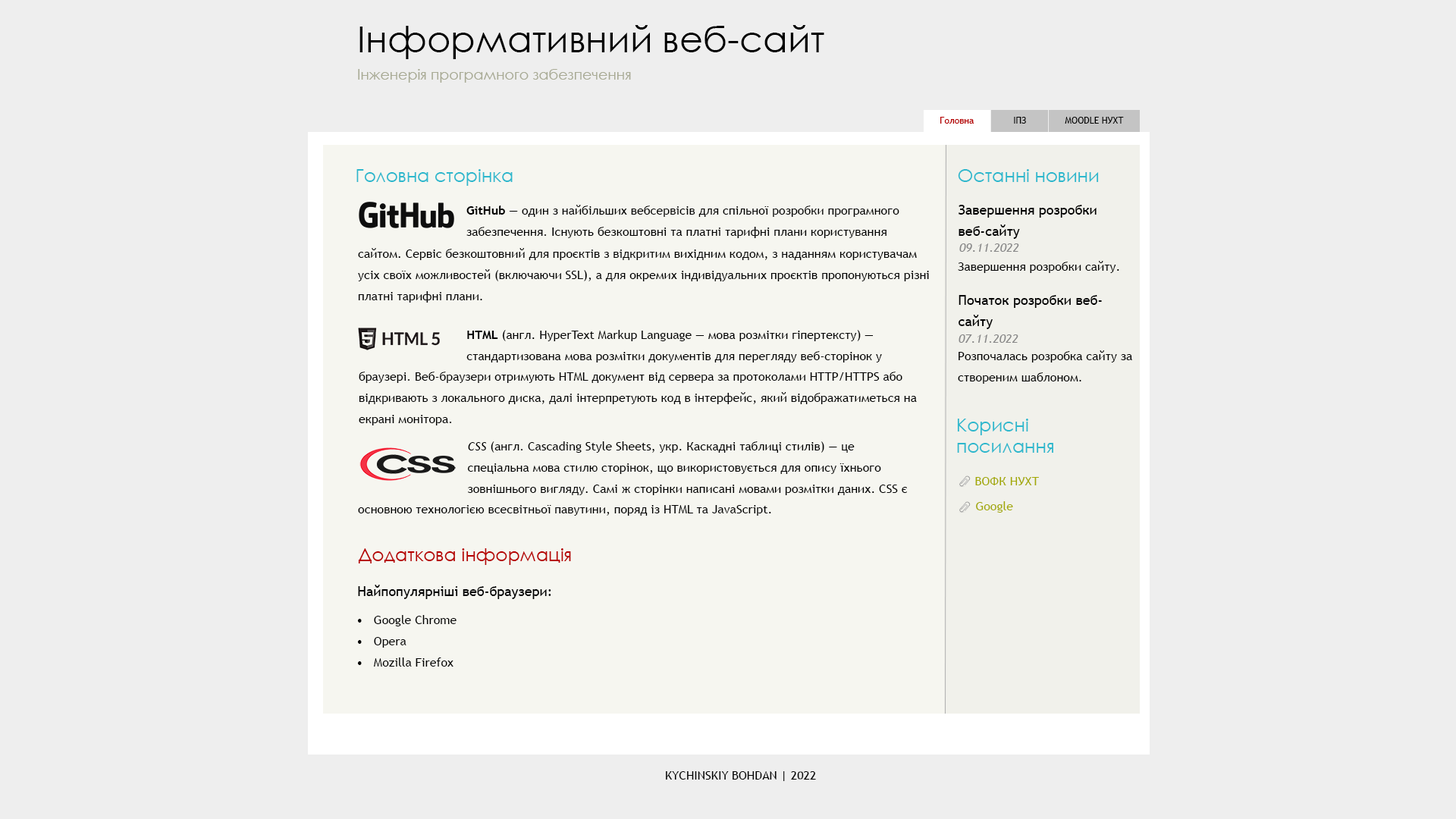
<style>
.page{position:relative;width:1456px;height:819px;background:#eeeeee}
.page>*{position:absolute;margin:0}
.t1{font:36.4px "CenturyGothic";color:#000000}
.t2{font:14.4px "CenturyGothic";color:#a8aa94}
.t3{font:9.1px "TrebuchetMS";color:#b60000}
.t4{font:9.1px "TrebuchetMS";color:#000000}
.t5{font:18.2px "CenturyGothic";color:#2db8cd}
.t6{font:12.1px/21.2px "TrebuchetMS";color:#000000}
.t7{font:12.1px/21.2px "TrebuchetMS-Bold";color:#000000}
.t8{font:13.6px/21.2px "TrebuchetMS";color:#000000}
.t9{font:12.1px "TrebuchetMS-Italic";color:#888888}
.t10{font:12.1px "TrebuchetMS";color:#000000}
.t11{font:18.2px/21.2px "CenturyGothic";color:#2db8cd}
.t12{font:12.1px/21.2px "TrebuchetMS-Italic";color:#000000}
.t13{font:12.1px "TrebuchetMS";color:#a4aa04}
.t14{font:18.2px "CenturyGothic";color:#b60000}
.t15{font:13.6px "TrebuchetMS";color:#000000}
</style>
<div class="page">
<p class="t1" style="left:359px;top:25px;width:465px;height:34px">Інформативний веб-сайт</p>
<p class="t2" style="left:358px;top:69px;width:273px;height:14px">Інженерія програмного забезпечення</p>
<p class="t3" style="left:940px;top:117px;width:34px;height:7px">Головна</p>
<p class="t4" style="left:1014px;top:117px;width:12px;height:7px">ІПЗ</p>
<p class="t4" style="left:1065px;top:117px;width:59px;height:7px">MOODLE НУХТ</p>
<p class="t5" style="left:356px;top:169px;width:157px;height:17px">Головна сторінка</p>
<p class="t5" style="left:958px;top:169px;width:141px;height:13px">Останні новини</p>
<p class="t6" style="left:466px;top:205px;width:433px;height:33px"><span class="t7">GitHub </span>— один з найбільших вебсервісів для спільної розробки програмного <br>забезпечення. Існують безкоштовні та платні тарифні плани користування</p>
<p class="t8" style="left:959px;top:205px;width:138px;height:34px">Завершення розробки<br>веб-сайту</p>
<p class="t9" style="left:959px;top:243px;width:60px;height:9px">09.11.2022</p>
<p class="t6" style="left:358px;top:248px;width:571px;height:55px">сайтом. Сервіс безкоштовний для проєктів з відкритим вихідним кодом, з наданням користувачам <br>усіх своїх можливостей (включаючи SSL), а для окремих індивідуальних проєктів пропонуються різні <br>платні тарифні плани.</p>
<p class="t10" style="left:958px;top:261px;width:161px;height:12px">Завершення розробки сайту.</p>
<p class="t8" style="left:959px;top:295px;width:143px;height:34px">Початок розробки веб-<br>сайту</p>
<p class="t6" style="left:466px;top:330px;width:416px;height:32px"><span class="t7">HTML</span> (англ. HyperText Markup Language — мова розмітки гіпертексту) — <br>стандартизована мова розмітки документів для перегляду веб-сторінок у</p>
<p class="t9" style="left:959px;top:334px;width:59px;height:9px">07.11.2022</p>
<p class="t6" style="left:958px;top:350px;width:174px;height:34px">Розпочалась розробка сайту за <br>створеним шаблоном.</p>
<p class="t6" style="left:359px;top:372px;width:558px;height:53px">браузері. Веб-браузери отримують HTML документ від сервера за протоколами HTTP/HTTPS або <br>відкривають з локального диска, далі інтерпретують код в інтерфейс, який відображатиметься на <br>екрані монітора.</p>
<p class="t11" style="left:957px;top:419px;width:96px;height:34px">Корисні <br>посилання</p>
<p class="t6" style="left:467px;top:441px;width:440px;height:54px"><span class="t12">CSS </span>(англ. Cascading Style Sheets, укр. Каскадні таблиці стилів) — це <br>спеціальна мова стилю сторінок, що використовується для опису їхнього <br>зовнішнього вигляду. Самі ж сторінки написані мовами розмітки даних. CSS є</p>
<p class="t13" style="left:975px;top:477px;width:64px;height:8px">ВОФК НУХТ</p>
<p class="t10" style="left:358px;top:505px;width:413px;height:11px">основною технологією всесвітньої павутини, поряд із HTML та JavaScript.</p>
<p class="t13" style="left:976px;top:501px;width:37px;height:12px">Google</p>
<p class="t14" style="left:358px;top:548px;width:213px;height:17px">Додаткова інформація</p>
<p class="t15" style="left:358px;top:585px;width:193px;height:14px">Найпопулярніші веб-браузери:</p>
<p class="t6" style="left:357px;top:615px;width:100px;height:52px">•   Google Chrome<br>•   Opera<br>•   Mozilla Firefox</p>
<p class="t10" style="left:666px;top:771px;width:150px;height:10px">KYCHINSKIY BOHDAN | 2022</p>
</div>
